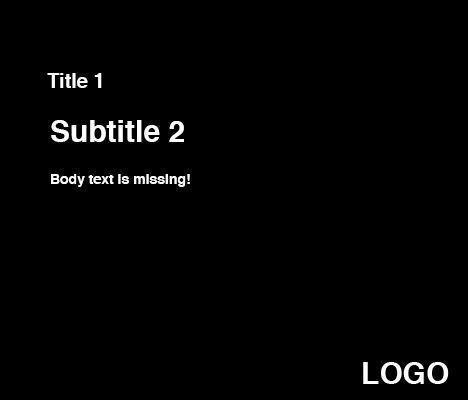
<style>
.page{position:relative;width:468px;height:400px;background:#000000}
.page>*{position:absolute;margin:0}
.t1{font:20px "Helvetica-Bold";color:#ffffff}
.t2{font:30px "Helvetica-Bold";color:#ffffff}
.t3{font:14px "Helvetica-Bold";color:#ffffff}
</style>
<div class="page">
<p class="t1" style="left:47px;top:73px;width:55px;height:15px">Title 1</p>
<p class="t2" style="left:51px;top:120px;width:133px;height:22px">Subtitle 2</p>
<p class="t3" style="left:51px;top:174px;width:139px;height:13px">Body text is missing!</p>
</div>
